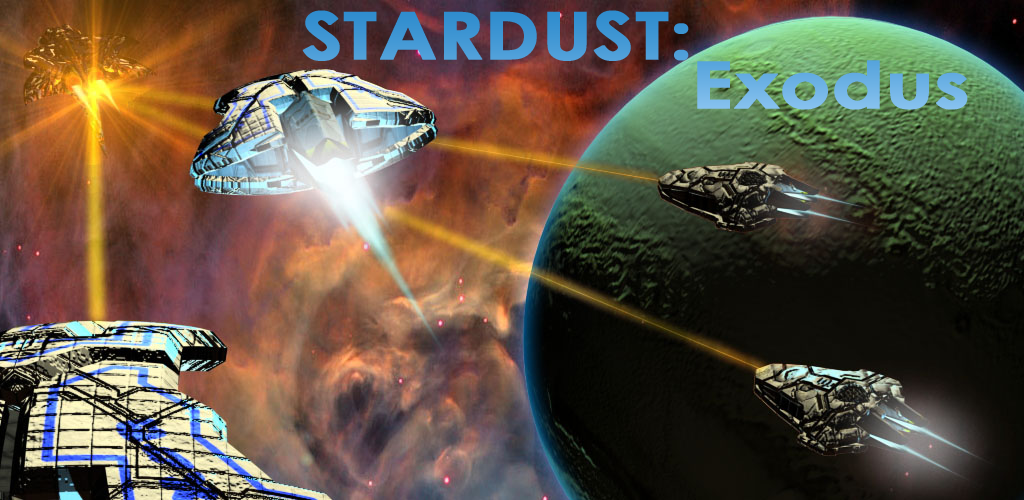
<style>
.page{position:relative;width:1024px;height:500px}
.page>*{position:absolute;margin:0}
.t1{font:65.7px "CenturyGothic-Bold";color:#3f96d3;font-weight:bold;scale:1.18 1}
.t2{font:65px "CenturyGothic-Bold";color:#73b5e7;font-weight:bold;scale:1.2 1}
</style>
<div class="page">
<p class="t1" style="left:302px;top:10px;width:387px;height:51px">STARDUST:</p>
<p class="t2" style="left:697px;top:60px;width:271px;height:50px">Exodus</p>
</div>
